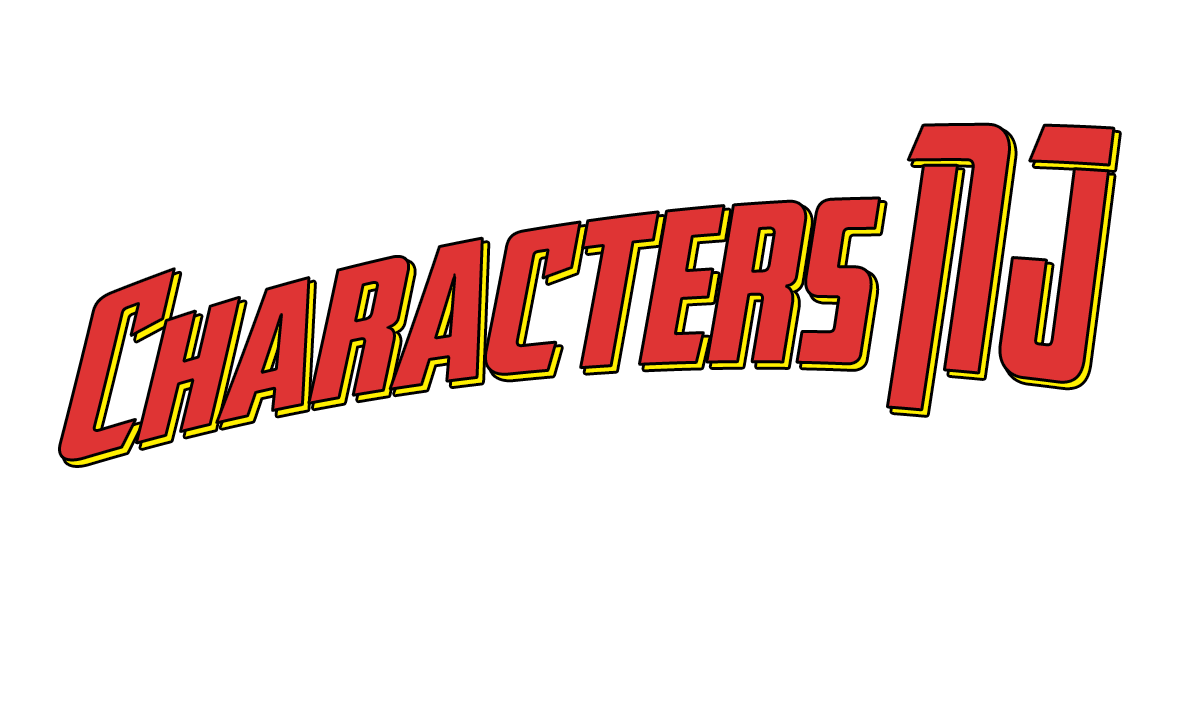
<style>
.page{position:relative;width:1200px;height:720px;background:#ffffff}
.page>*{position:absolute;margin:0}
.t1{font:200px "AvengeanceHeroicAvengerBold";color:#df3434}
</style>
<div class="page">
<p class="t1" style="left:59px;top:124px;width:1055px;height:336px;rotate:-6deg">Characters NJ</p>
<p class="t1" style="left:64px;top:129px;width:1055px;height:336px;rotate:-6deg">Characters NJ</p>
</div>
